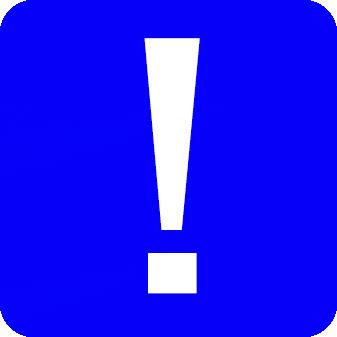
<style>
.page{position:relative;width:337px;height:337px;background:#0600f8}
.page>*{position:absolute;margin:0}
.t1{font:381.4px "FranklinGothic-Book";letter-spacing:-0.1em;color:#ffffff;font-weight:bold;scale:1.23 1}
</style>
<div class="page">
<p class="t1" style="left:144px;top:38px;width:56px;height:256px">!</p>
</div>
